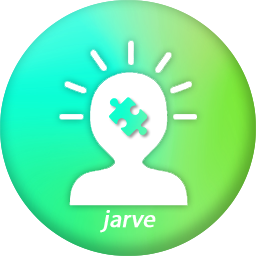
<style>
.page{position:relative;width:256px;height:256px;background:#ffffff}
.page>*{position:absolute;margin:0}
.t1{font:24.4px "MyriadPro-Regular";color:#ffffff;font-weight:bold;font-style:italic}
</style>
<div class="page">
<p class="t1" style="left:100px;top:210px;width:56px;height:23px">jarve</p>
</div>
